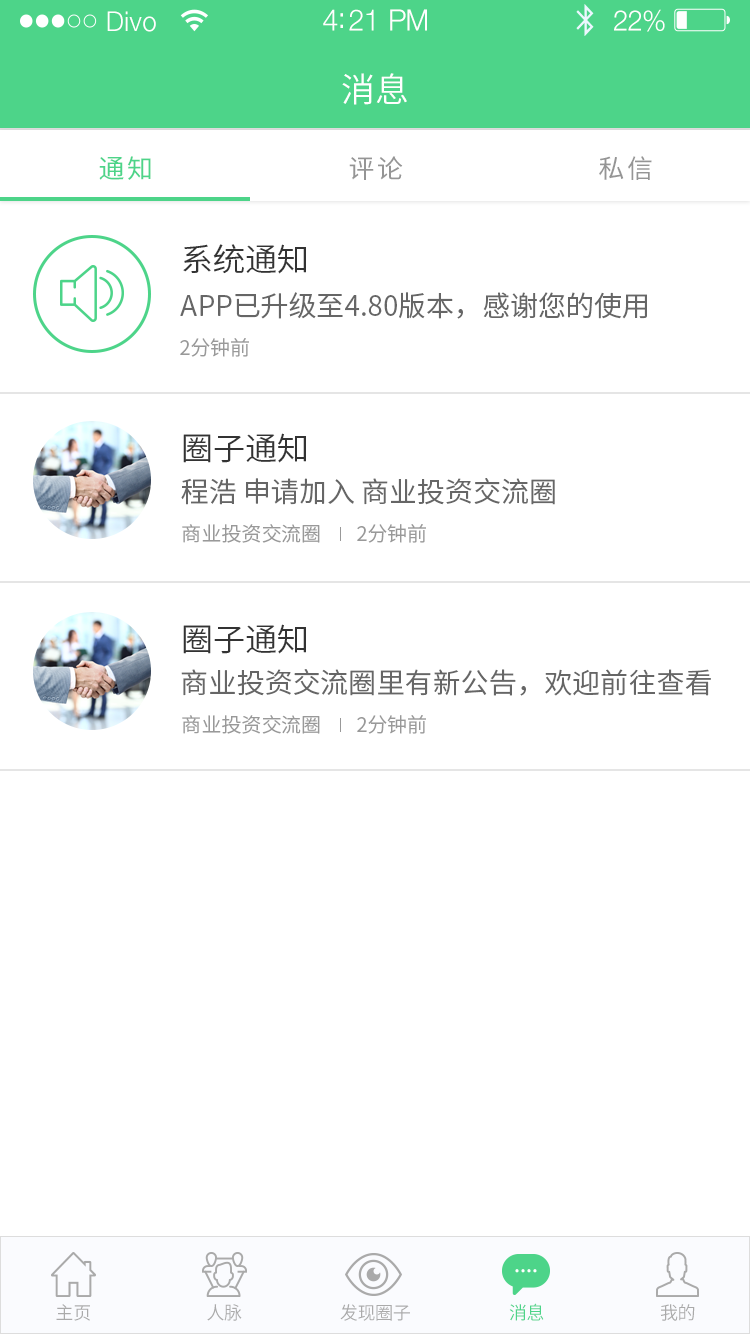
<style>
.page{position:relative;width:750px;height:1334px;background:#ffffff}
.page>*{position:absolute;margin:0}
.t1{font:27.3px "HelveticaNeue-Light";letter-spacing:0.02em;color:#ffffff;scale:0.96 1}
.t2{font:29.6px "HelveticaNeue-Light";letter-spacing:-0.02em;color:#ffffff;scale:0.96 1}
.t3{font:28.4px "HelveticaNeue-Light";letter-spacing:-0.02em;color:#ffffff;scale:0.96 1}
.t4{font:34px "SourceHanSansCN-Normal";letter-spacing:0.02em;color:#ffffff}
.t5{font:26px "SourceHanSansCN-Regular";letter-spacing:0.1em;color:#4dd489}
.t6{font:26px "SourceHanSansCN-Regular";letter-spacing:0.1em;color:#959595}
.t7{font:32px "SourceHanSansCN-Normal";color:#333333}
.t8{font:28px "SourceHanSansCN-Normal";color:#666666}
.t9{font:20px "SourceHanSansCN-Normal";color:#999999}
.t10{font:18px "SourceHanSansCN-Normal";color:#aaaaaa}
.t11{font:18px "SourceHanSansCN-Normal";color:#4dd489}
</style>
<div class="page">
<p class="t1" style="left:107px;top:11px;width:49px;height:21px">Divo</p>
<p class="t2" style="left:323px;top:9px;width:104px;height:22px">4:21 PM</p>
<p class="t3" style="left:614px;top:9px;width:51px;height:23px">22%</p>
<p class="t4" style="left:342px;top:73px;width:65px;height:32px">消息</p>
<p class="t5" style="left:99px;top:156px;width:52px;height:24px">通知</p>
<p class="t6" style="left:349px;top:156px;width:54px;height:24px">评论</p>
<p class="t6" style="left:599px;top:156px;width:53px;height:24px">私信</p>
<p class="t7" style="left:183px;top:244px;width:123px;height:30px">系统通知</p>
<p class="t8" style="left:180px;top:292px;width:467px;height:27px">APP已升级至4.80版本，感谢您的使用</p>
<p class="t9" style="left:180px;top:338px;width:69px;height:19px">2分钟前</p>
<p class="t7" style="left:183px;top:433px;width:123px;height:30px">圈子通知</p>
<p class="t8" style="left:181px;top:478px;width:374px;height:27px">程浩 申请加入 商业投资交流圈</p>
<p class="t9" style="left:182px;top:524px;width:138px;height:19px">商业投资交流圈</p>
<p class="t9" style="left:357px;top:524px;width:69px;height:19px">2分钟前</p>
<p class="t7" style="left:183px;top:624px;width:123px;height:30px">圈子通知</p>
<p class="t8" style="left:181px;top:669px;width:530px;height:27px">商业投资交流圈里有新公告，欢迎前往查看</p>
<p class="t9" style="left:182px;top:715px;width:138px;height:19px">商业投资交流圈</p>
<p class="t9" style="left:357px;top:715px;width:69px;height:19px">2分钟前</p>
<p class="t10" style="left:56px;top:1304px;width:34px;height:17px">主页</p>
<p class="t10" style="left:207px;top:1304px;width:35px;height:17px">人脉</p>
<p class="t10" style="left:340px;top:1304px;width:70px;height:17px">发现圈子</p>
<p class="t11" style="left:509px;top:1303px;width:35px;height:18px">消息</p>
<p class="t10" style="left:660px;top:1304px;width:35px;height:17px">我的</p>
</div>
